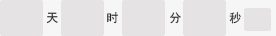
<style>
.page{position:relative;width:276px;height:36px;background:#e5e3e3}
.page>*{position:absolute;margin:0}
.t1{font:12px "SimHei";color:#262626}
</style>
<div class="page">
<p class="t1" style="left:46px;top:12px;width:12px;height:12px">天</p>
<p class="t1" style="left:107px;top:12px;width:11px;height:12px">时</p>
<p class="t1" style="left:170px;top:12px;width:11px;height:12px">分</p>
<p class="t1" style="left:229px;top:11px;width:12px;height:13px">秒</p>
</div>
